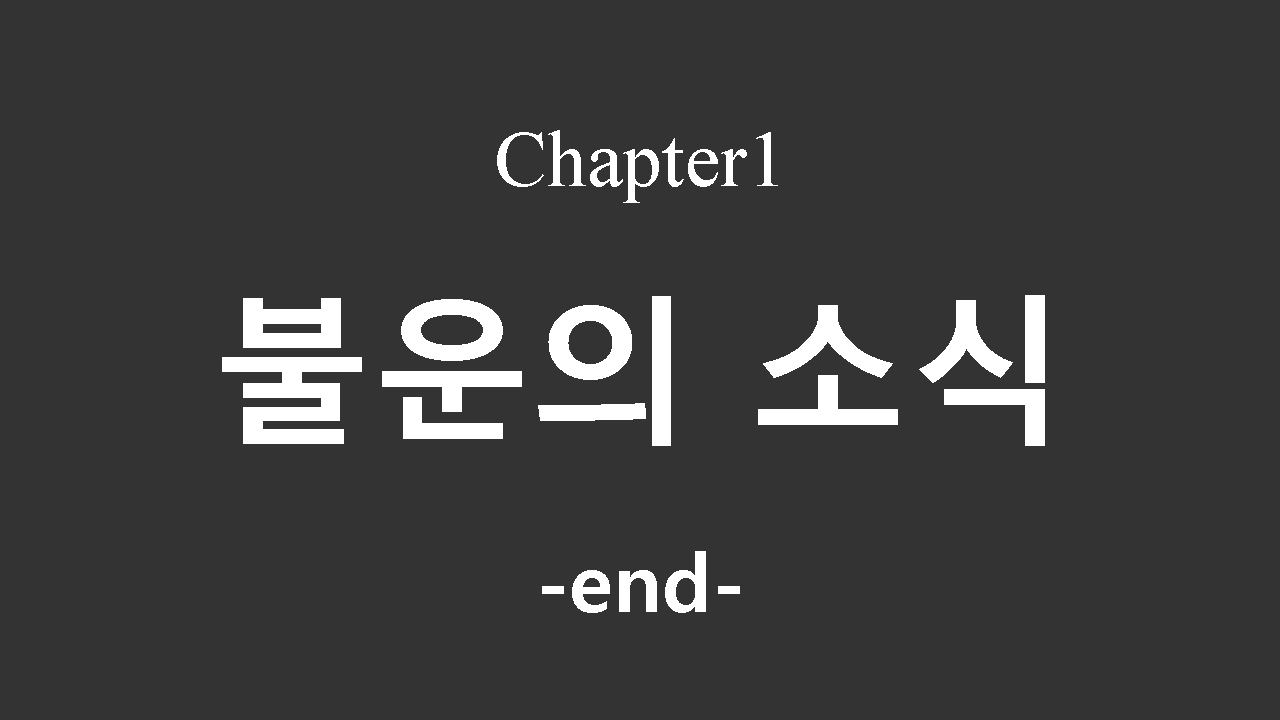
<style>
.page{position:relative;width:1280px;height:720px;background:#333333}
.page>*{position:absolute;margin:0}
.t1{font:80px "TimesNewRomanPSMT";color:#ffffff}
.t2{font:160px "MalgunGothicBold";color:#ffffff}
.t3{font:80px "MalgunGothicBold";color:#ffffff}
</style>
<div class="page">
<p class="t1" style="left:497px;top:130px;width:281px;height:73px">Chapter1</p>
<p class="t2" style="left:222px;top:295px;width:823px;height:151px">불운의 소식</p>
<p class="t3" style="left:542px;top:551px;width:198px;height:62px">-end-</p>
</div>
